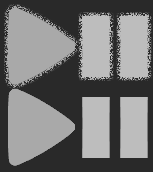
<style>
.page{position:relative;width:153px;height:172px;background:#292929}
.page>*{position:absolute;margin:0}
.t1{font:92px "Broadway";color:#bdbdbd}
</style>
<div class="page">
<p class="t1" style="left:82px;top:16px;width:66px;height:61px">II</p>
<p class="t1" style="left:82px;top:97px;width:66px;height:61px">II</p>
</div>
